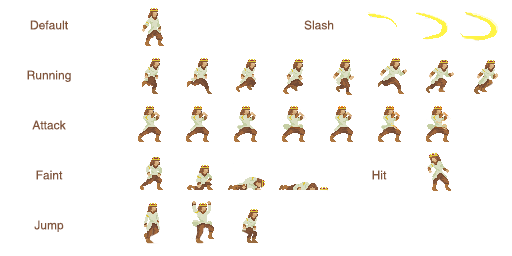
<style>
.page{position:relative;width:512px;height:256px;background:#ffffff}
.page>*{position:absolute;margin:0}
.t1{font:12px "Helvetica";color:#82553a}
</style>
<div class="page">
<p class="t1" style="left:30px;top:20px;width:38px;height:10px">Default</p>
<p class="t1" style="left:304px;top:20px;width:30px;height:10px">Slash</p>
<p class="t1" style="left:27px;top:70px;width:44px;height:12px">Running</p>
<p class="t1" style="left:32px;top:120px;width:34px;height:10px">Attack</p>
<p class="t1" style="left:36px;top:170px;width:27px;height:10px">Faint</p>
<p class="t1" style="left:372px;top:170px;width:15px;height:10px">Hit</p>
<p class="t1" style="left:34px;top:220px;width:30px;height:12px">Jump</p>
</div>
